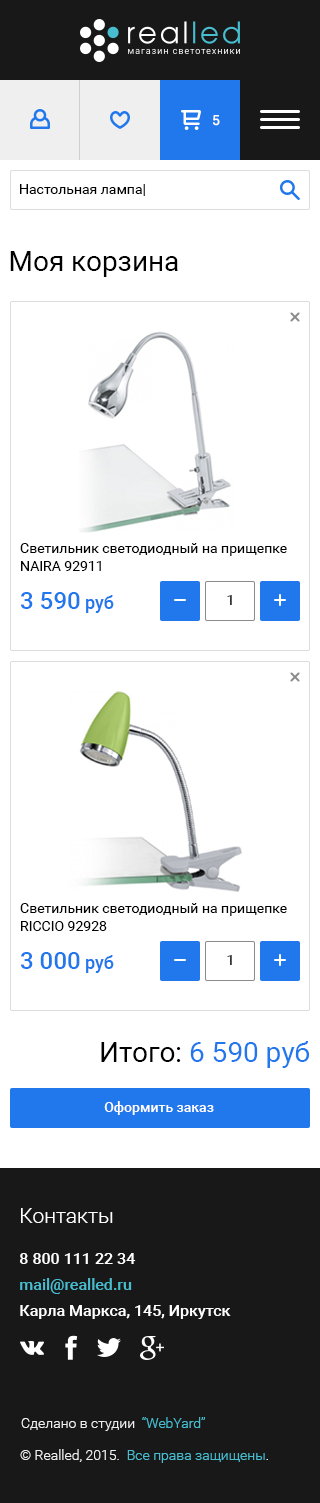
<style>
.page{position:relative;width:320px;height:1503px;background:#ffffff}
.page>*{position:absolute;margin:0}
.t1{font:14px "Roboto-Medium";color:#ffffff}
.t2{font:14px "Roboto-Regular";color:#000000}
.t3{font:28px "Roboto-Regular";color:#000000}
.t4{font:14px/18px "Roboto-Regular";color:#010101}
.t5{font:24px "Roboto-Medium";color:#2177ec}
.t6{font:18px "Roboto-Medium";color:#2177ec}
.t7{font:14px "Roboto-Medium"}
.t8{font:28px "Roboto-Regular";color:#2177ec}
.t9{font:21px "Roboto-Light";color:#ffffff}
.t10{font:16px/26px "Roboto-Medium";color:#ffffff}
.t11{font:16px/26px "Roboto-Medium";color:#47bdcf}
.t12{font:14px "Roboto-Light";color:#efefef}
.t13{font:14px "Roboto-Light";color:#47bdcf}
</style>
<div class="page">
<p class="t1" style="left:213px;top:115px;width:7px;height:11px">5</p>
<p class="t2" style="left:20px;top:184px;width:125px;height:12px">Настольная лампа|</p>
<p class="t3" style="left:10px;top:251px;width:168px;height:26px">Моя корзина</p>
<p class="t4" style="left:20px;top:543px;width:267px;height:28px">Светильник светодиодный на прищепке NAIRA 92911</p>
<p class="t5" style="left:20px;top:592px;width:94px;height:21px">3 590<span class="t6"> руб</span></p>
<p class="t7" style="left:227px;top:595px;width:5px;height:10px">1</p>
<p class="t4" style="left:20px;top:903px;width:267px;height:28px">Светильник светодиодный на прищепке RICCIO 92928</p>
<p class="t5" style="left:20px;top:952px;width:94px;height:21px">3 000<span class="t6"> руб</span></p>
<p class="t7" style="left:227px;top:955px;width:5px;height:10px">1</p>
<p class="t8" style="left:101px;top:1041px;width:208px;height:27px"><span class="t3">Итого: </span>6 590 руб</p>
<p class="t1" style="left:104px;top:1101px;width:110px;height:14px">Оформить заказ</p>
<p class="t9" style="left:21px;top:1208px;width:92px;height:15px">Контакты</p>
<p class="t10" style="left:20px;top:1253px;width:211px;height:66px">8 800 111 22 34 <br><span class="t11">mail@realled.ru<br></span>Карла Маркса, 145, Иркутск</p>
<p class="t12" style="left:21px;top:1417px;width:184px;height:14px">Сделано в студии  <span class="t13">“WebYard”</span></p>
<p class="t13" style="left:20px;top:1449px;width:248px;height:14px"><span class="t12">© Realled, 2015.  </span>Все права защищены<span class="t12">.</span></p>
</div>
